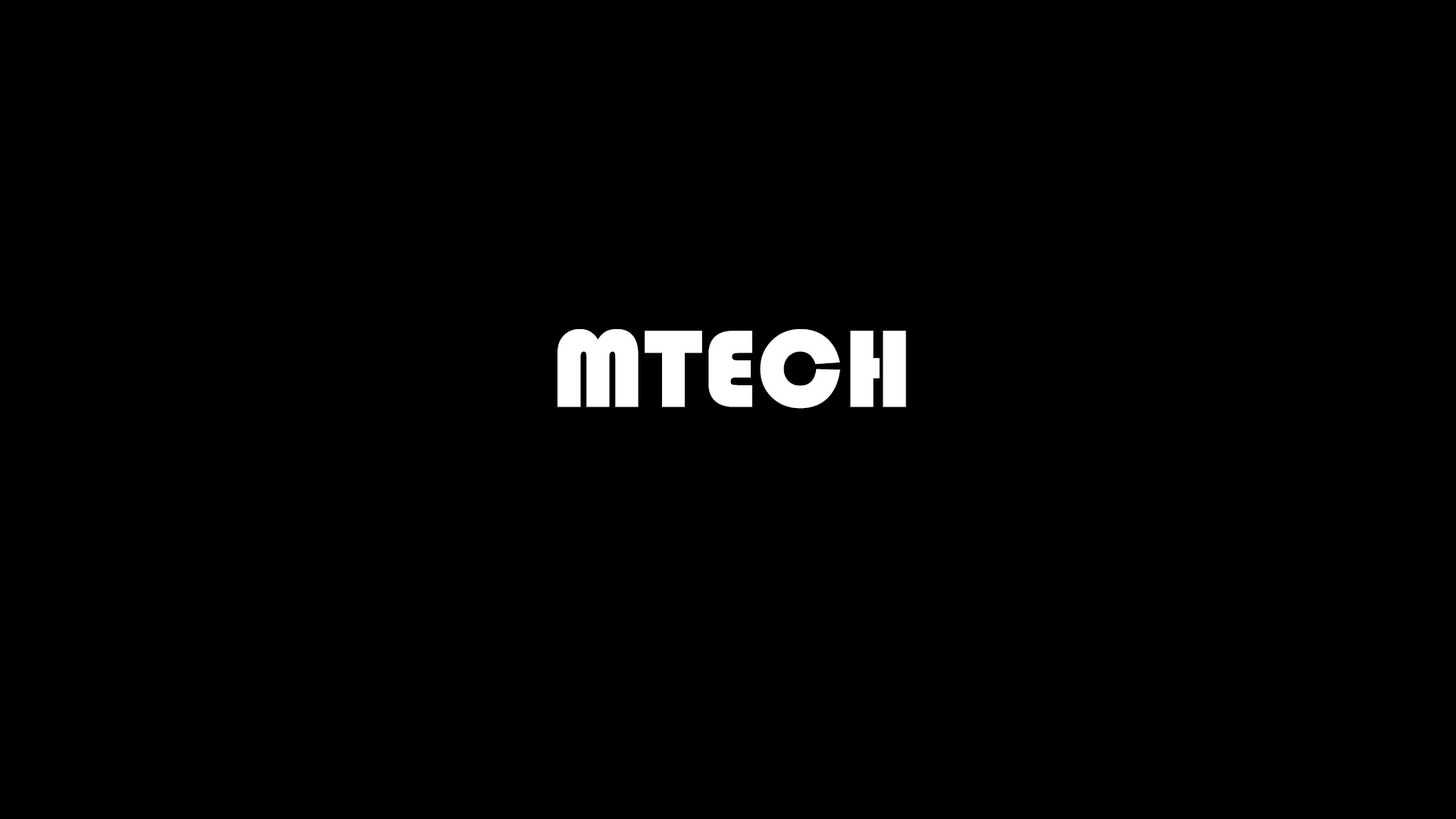
<style>
.page{position:relative;width:1456px;height:819px;background:#000000}
.page>*{position:absolute;margin:0}
.t1{font:113.7px "STHupo";color:#ffffff}
</style>
<div class="page">
<p class="t1" style="left:557px;top:329px;width:349px;height:80px">MTECH</p>
</div>
